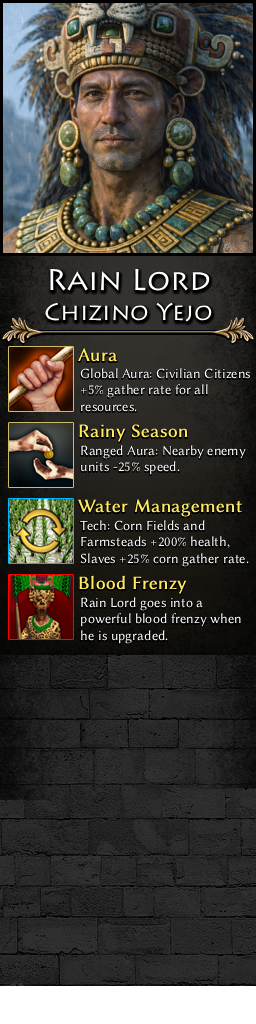
<style>
.page{position:relative;width:256px;height:1024px}
.page>*{position:absolute;margin:0}
.t1{font:24px/30px "Lithos";color:#ffffff}
.t2{font:30px/30px "Lithos";color:#ffffff}
.t3{font:19px "LinBiolinumO";color:#ffe963;font-weight:bold}
.t4{font:14px "LinBiolinumO";color:#ffffff}
</style>
<div class="page">
<p class="t1" style="left:45px;top:268px;width:167px;height:54px;text-align:center"><span class="t2">Rain Lord<br></span>Chizino Yejo</p>
<p class="t3" style="left:78px;top:348px;width:40px;height:14px">Aura</p>
<p class="t4" style="left:80px;top:368px;width:170px;height:44px">Global Aura: Civilian Citizens<br>+5% gather rate for all<br>resources.</p>
<p class="t3" style="left:79px;top:424px;width:109px;height:18px">Rainy Season</p>
<p class="t4" style="left:81px;top:445px;width:165px;height:30px">Ranged Aura: Nearby enemy<br>units -25% speed.</p>
<p class="t3" style="left:78px;top:499px;width:164px;height:18px">Water Management</p>
<p class="t4" style="left:80px;top:520px;width:169px;height:47px">Tech: Corn Fields and<br>Farmsteads +200% health,<br>Slaves +25% corn gather rate.</p>
<p class="t3" style="left:79px;top:575px;width:108px;height:19px">Blood Frenzy</p>
<p class="t4" style="left:81px;top:597px;width:160px;height:47px">Rain Lord goes into a <br>powerful blood frenzy when <br>he is upgraded.</p>
</div>
